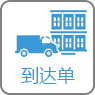
<style>
.page{position:relative;width:95px;height:95px;background:#ffffff}
.page>*{position:absolute;margin:0}
.t1{font:18px "MicrosoftYaHei";color:#3998d6}
</style>
<div class="page">
<p class="t1" style="left:21px;top:67px;width:54px;height:17px">到达单</p>
</div>
